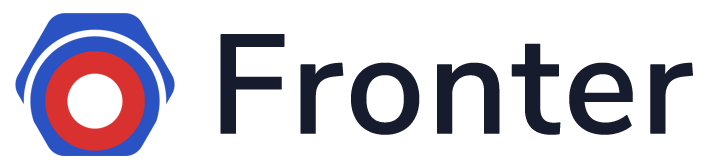
<style>
.page{position:relative;width:708px;height:168px;background:#ffffff}
.page>*{position:absolute;margin:0}
.t1{font:140px "NunitoSans-SemiBold";letter-spacing:-0.005em;color:#161c2d;font-weight:bold}
</style>
<div class="page">
<p class="t1" style="left:220px;top:34px;width:473px;height:101px">Fronter</p>
</div>
